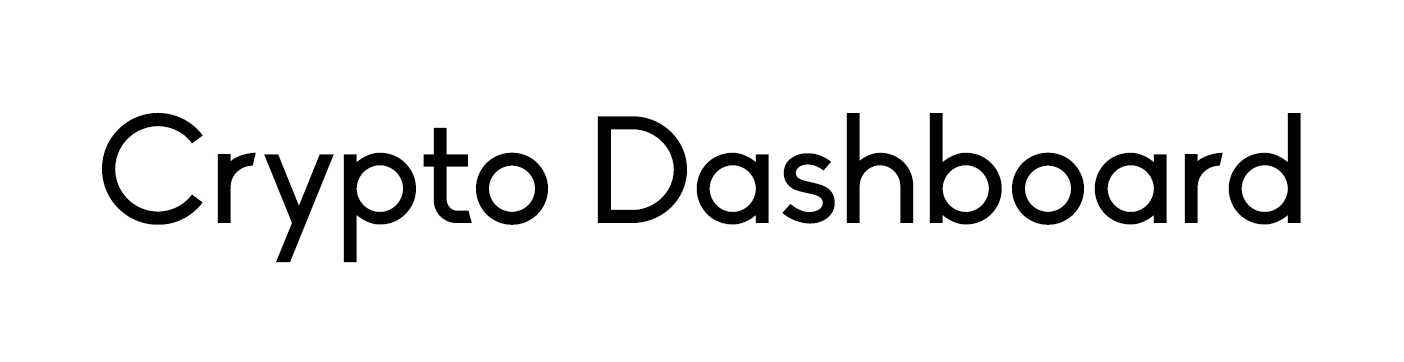
<style>
.page{position:relative;width:1404px;height:362px;background:#ffffff}
.page>*{position:absolute;margin:0}
.t1{font:150px "Biko";color:#000101}
</style>
<div class="page">
<p class="t1" style="left:102px;top:112px;width:1199px;height:151px">Crypto Dashboard</p>
</div>
